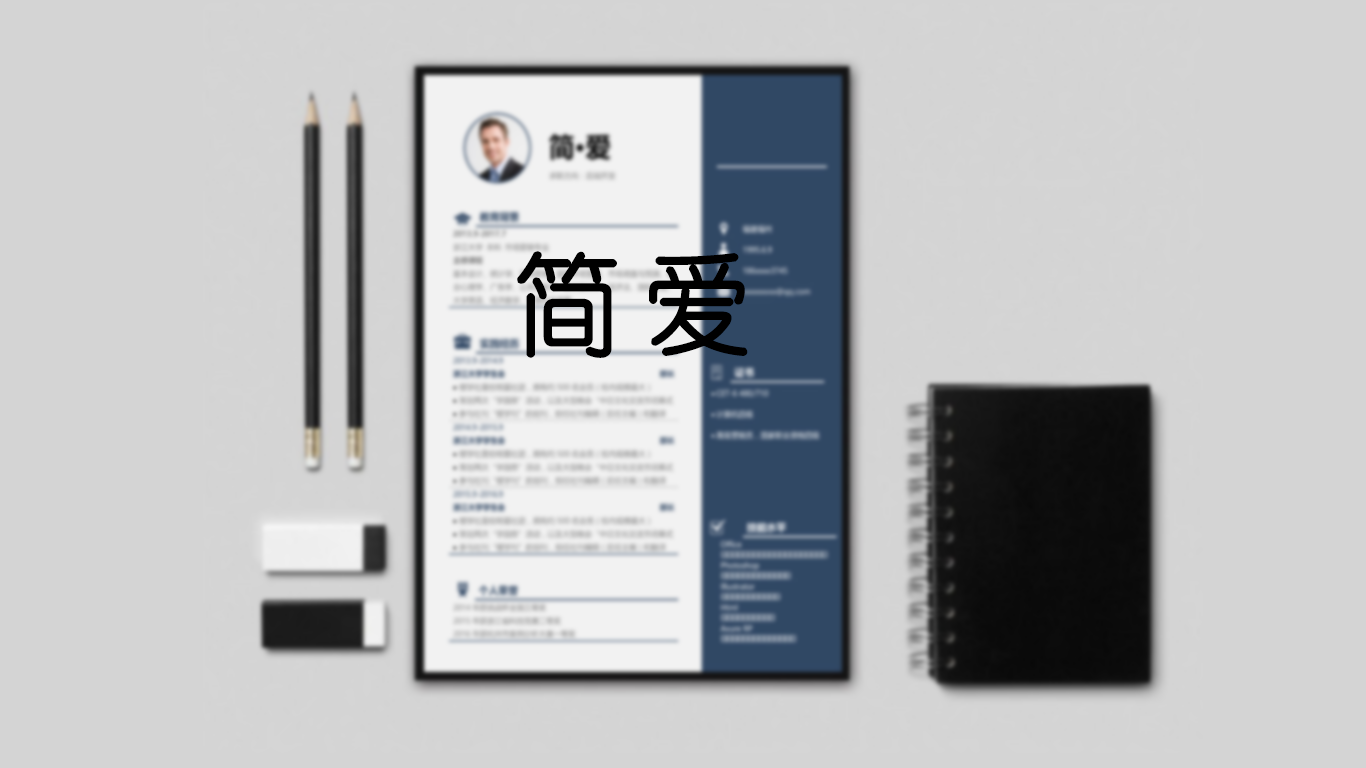
<style>
.page{position:relative;width:1366px;height:768px;background:#d4d4d4}
.page>*{position:absolute;margin:0}
.t1{font:110px "YouYuan";letter-spacing:0.16em;color:#000000;font-weight:bold}
</style>
<div class="page">
<p class="t1" style="left:517px;top:251px;width:231px;height:107px">简爱</p>
</div>
